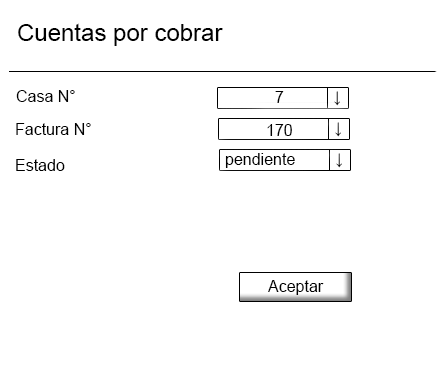
<style>
.page{position:relative;width:444px;height:378px;background:#ffffff}
.page>*{position:absolute;margin:0}
.t1{font:12px "ArialMT";color:#000000}
</style>
<div class="page">
<p class="t1" style="left:275px;top:91px;width:9px;height:12px">7</p>
<p class="t1" style="left:267px;top:124px;width:25px;height:12px">170</p>
<p class="t1" style="left:16px;top:159px;width:49px;height:12px">Estado</p>
<p class="t1" style="left:225px;top:153px;width:70px;height:15px">pendiente</p>
<p class="t1" style="left:268px;top:280px;width:56px;height:15px">Aceptar</p>
</div>
